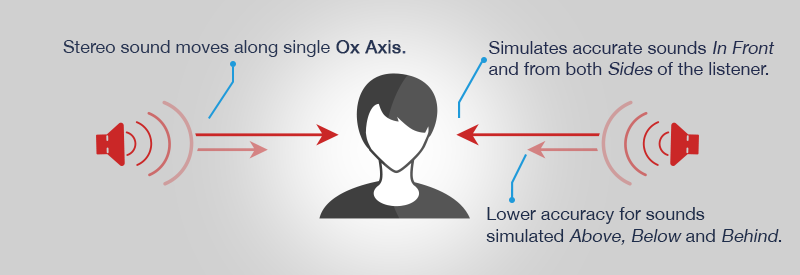
<style>
.page{position:relative;width:800px;height:275px;background:#d0d0d0}
.page>*{position:absolute;margin:0}
.t1{font:18px "HelveticaNeue";color:#273554}
.t2{font:18px "HelveticaNeue";color:#273554;font-weight:bold}
.t3{font:18px "HelveticaNeue";color:#3b4b70;font-weight:bold}
.t4{font:18px "HelveticaNeue";color:#222c4f}
.t5{font:18px "HelveticaNeue";color:#222c4f;font-style:italic}
.t6{font:18px "HelveticaNeue";color:#1e2d4b}
.t7{font:18px "HelveticaNeue";color:#1e2d4b;font-style:italic}
</style>
<div class="page">
<p class="t1" style="left:63px;top:40px;width:343px;height:17px">Stereo sound moves along single<span class="t2"> Ox Axis</span><span class="t3">.</span></p>
<p class="t4" style="left:489px;top:41px;width:286px;height:34px">Simulates accurate sounds <span class="t5">In Front <br></span>and from both <span class="t5">Sides</span> of the listener.</p>
<p class="t6" style="left:486px;top:207px;width:296px;height:38px">Lower accuracy for sounds <br>simulated <span class="t7">Above, Below </span>and <span class="t7">Behind</span>.</p>
</div>
